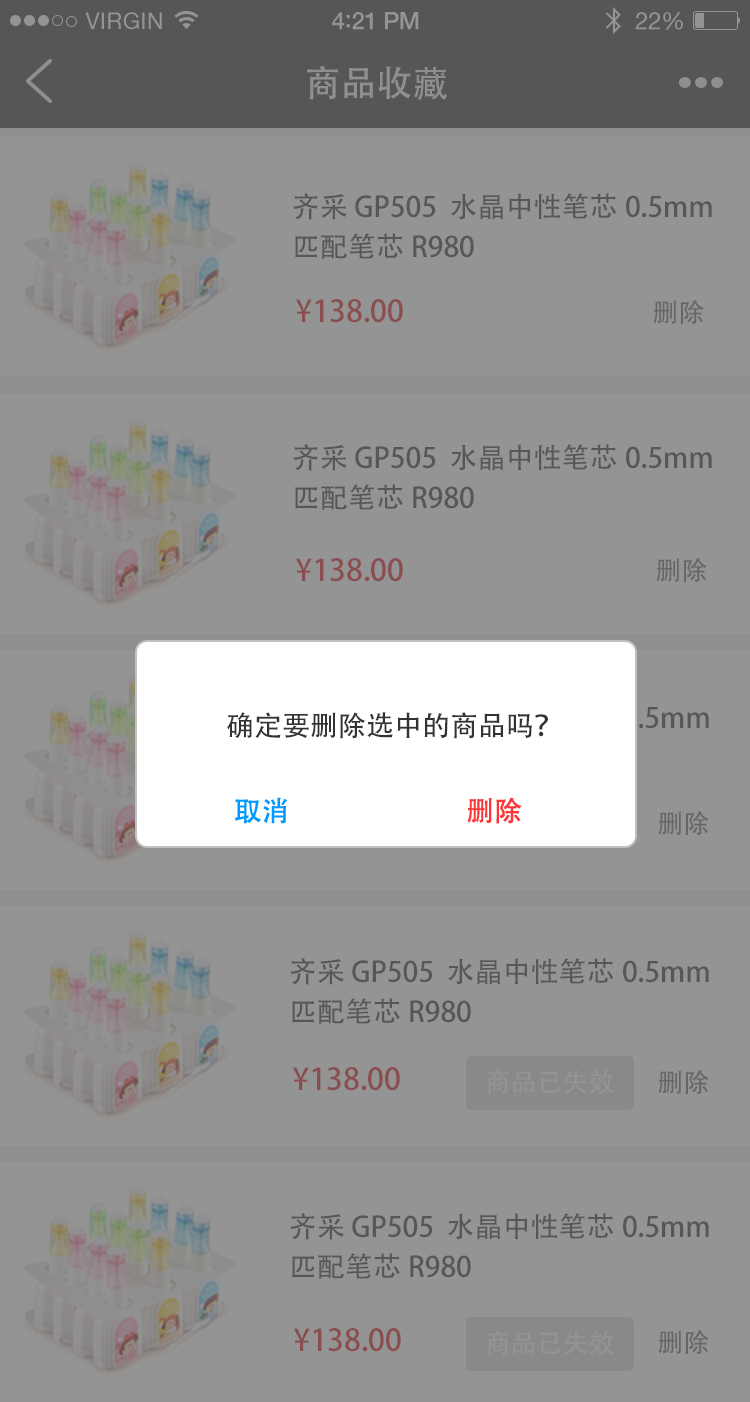
<style>
.page{position:relative;width:750px;height:1402px;background:#949494}
.page>*{position:absolute;margin:0}
.t1{font:36px "AdobeHeitiStd-Regular";color:#8f8f8f}
.t2{font:28px/40px "AdobeHeitiStd-Regular";color:#575757}
.t3{font:30px "AdobeHeitiStd-Regular";color:#8a4d50}
.t4{font:28px "AdobeHeitiStd-Regular";color:#8a4d50;font-weight:bold}
.t5{font:26px "AdobeHeitiStd-Regular";color:#666666}
.t6{font:28px "AdobeHeitiStd-Regular";color:#333333}
.t7{font:27.8px "STHeiti";color:#0099ff}
.t8{font:27.8px "STHeiti";color:#fc3636}
.t9{font:26px "AdobeHeitiStd-Regular";color:#949494}
</style>
<div class="page">
<p class="t1" style="left:307px;top:66px;width:140px;height:34px">商品收藏</p>
<p class="t2" style="left:293px;top:193px;width:419px;height:66px">齐采 GP505  水晶中性笔芯0.5mm <br>匹配笔芯R980</p>
<p class="t3" style="left:295px;top:299px;width:108px;height:24px"><span class="t4"> </span>¥138.00</p>
<p class="t5" style="left:653px;top:300px;width:51px;height:24px">删除</p>
<p class="t2" style="left:293px;top:444px;width:419px;height:66px">齐采 GP505  水晶中性笔芯0.5mm <br>匹配笔芯R980</p>
<p class="t3" style="left:295px;top:558px;width:108px;height:24px"><span class="t4"> </span>¥138.00</p>
<p class="t5" style="left:656px;top:558px;width:51px;height:24px">删除</p>
<p class="t6" style="left:227px;top:712px;width:321px;height:27px">确定要删除选中的商品吗？</p>
<p class="t7" style="left:235px;top:797px;width:53px;height:27px">取消</p>
<p class="t8" style="left:467px;top:797px;width:55px;height:27px">删除</p>
<p class="t5" style="left:658px;top:811px;width:51px;height:24px">删除</p>
<p class="t2" style="left:290px;top:958px;width:419px;height:66px">齐采 GP505  水晶中性笔芯0.5mm<br>匹配笔芯R980</p>
<p class="t3" style="left:292px;top:1067px;width:108px;height:24px"><span class="t4"> </span>¥138.00</p>
<p class="t9" style="left:486px;top:1070px;width:128px;height:25px">商品已失效</p>
<p class="t5" style="left:658px;top:1070px;width:51px;height:24px">删除</p>
<p class="t2" style="left:290px;top:1213px;width:419px;height:66px">齐采 GP505  水晶中性笔芯0.5mm<br>匹配笔芯R980</p>
<p class="t3" style="left:293px;top:1328px;width:108px;height:24px"><span class="t4"> </span>¥138.00</p>
<p class="t9" style="left:486px;top:1331px;width:128px;height:25px">商品已失效</p>
<p class="t5" style="left:658px;top:1330px;width:51px;height:24px">删除</p>
</div>
